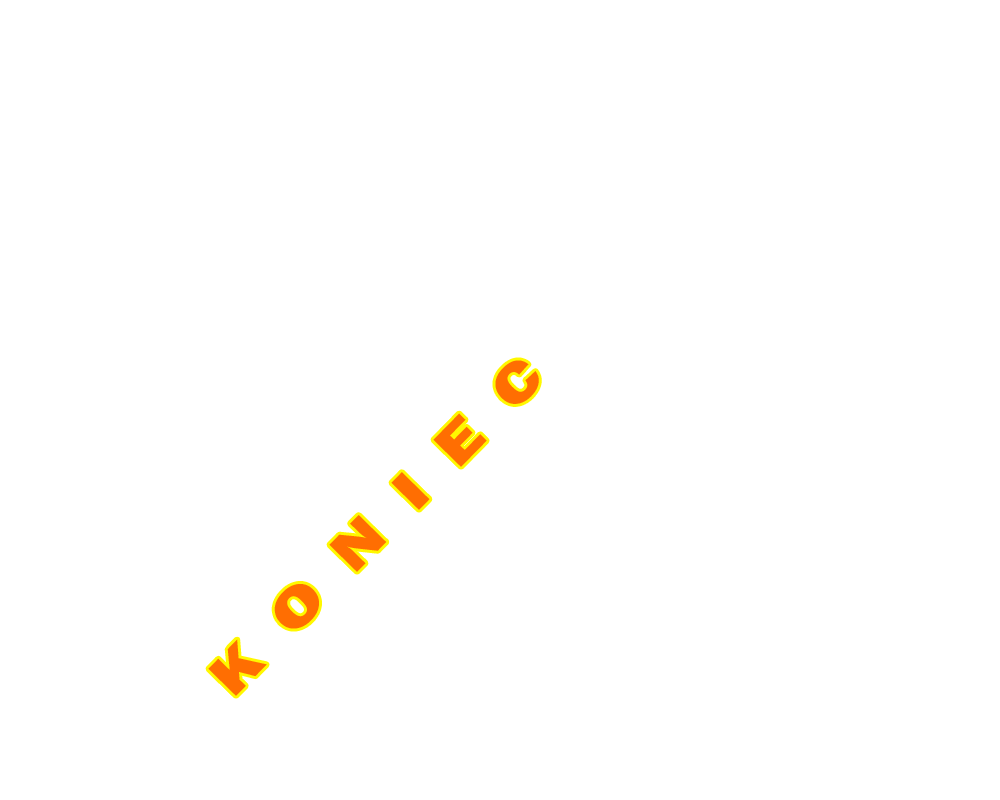
<style>
.page{position:relative;width:1000px;height:800px;background:#ffffff}
.page>*{position:absolute;margin:0}
.t1{font:58px "FranklinGothic-Heavy";letter-spacing:0.5em;color:#ff6e02;scale:1.27 1}
</style>
<div class="page">
<p class="t1" style="left:208px;top:360px;width:331px;height:336px;rotate:-46deg">KONIEC</p>
</div>
